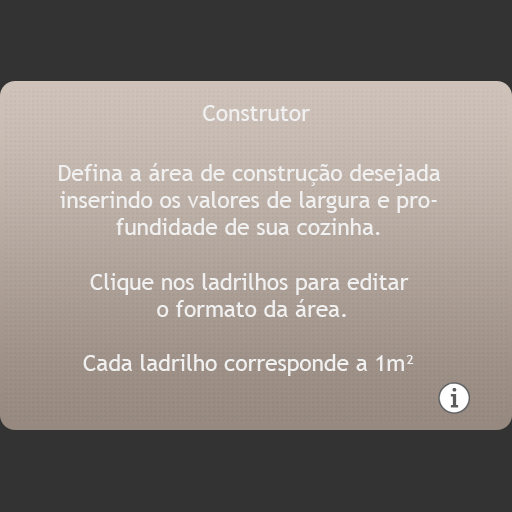
<style>
.page{position:relative;width:512px;height:512px;background:#333333}
.page>*{position:absolute;margin:0}
.t1{font:22.7px "TrebuchetMS";color:#f0f0f0}
</style>
<div class="page">
<p class="t1" style="left:203px;top:105px;width:107px;height:16px">Construtor</p>
<p class="t1" style="left:59px;top:163px;width:382px;height:213px;text-align:center">Defina a área de construção desejada inserindo os valores de largura e profundidade de sua cozinha.<br><br>Clique nos ladrilhos para editar<br> o formato da área.<br><br>Cada ladrilho corresponde a 1m²</p>
</div>
